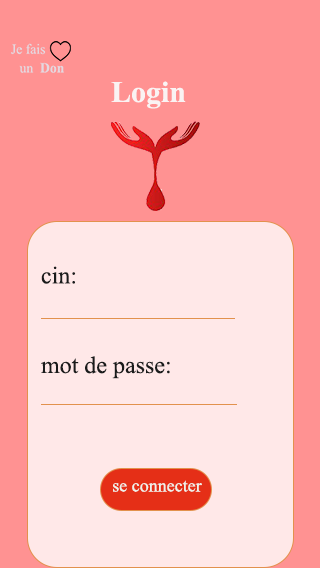
<style>
.page{position:relative;width:320px;height:568px;background:#ff9292}
.page>*{position:absolute;margin:0}
.t1{font:30px "TimesNewRomanPS-BoldMT";color:#faf3f3}
.t2{font:24px "TimesNewRomanPSMT";color:#1a1b1b}
.t3{font:18px "TimesNewRomanPSMT";color:#1a1b1b}
.t4{font:18px "TimesNewRomanPSMT";color:#eff1e9}
</style>
<div class="page">
<p class="t1" style="left:111px;top:81px;width:75px;height:28px">Login</p>
<p class="t2" style="left:41px;top:266px;width:35px;height:18px"><span class="t3"><br></span>cin:</p>
<p class="t2" style="left:41px;top:356px;width:129px;height:23px">mot de passe:</p>
<p class="t4" style="left:113px;top:480px;width:89px;height:12px">se connecter</p>
</div>
